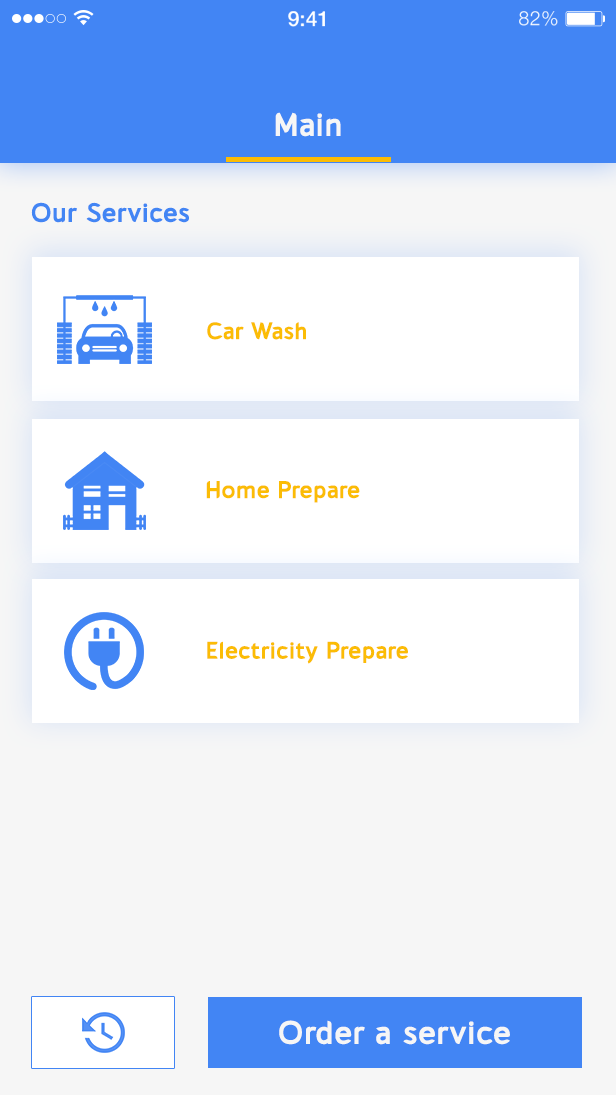
<style>
.page{position:relative;width:616px;height:1095px;background:#ffffff}
.page>*{position:absolute;margin:0}
.t1{font:21.3px "HelveticaNeue-Medium";color:#ffffff}
.t2{font:19.6px "HelveticaNeue-Light";letter-spacing:0.025em;color:#ffffff}
.t3{font:33px "cajitobold";color:#f6f6f6}
.t4{font:27px "cajitobold";color:#4285f4}
.t5{font:24px "cajitobold";color:#fbbc05}
</style>
<div class="page">
<p class="t1" style="left:288px;top:11px;width:37px;height:16px">9:41</p>
<p class="t2" style="left:519px;top:11px;width:39px;height:15px">82%</p>
<p class="t3" style="left:275px;top:112px;width:66px;height:25px">Main</p>
<p class="t4" style="left:31px;top:202px;width:158px;height:21px">Our Services</p>
<p class="t5" style="left:207px;top:322px;width:99px;height:18px">Car Wash</p>
<p class="t5" style="left:206px;top:481px;width:154px;height:22px">Home Prepare</p>
<p class="t5" style="left:207px;top:641px;width:201px;height:23px">Electricity Prepare</p>
<p class="t3" style="left:279px;top:1020px;width:231px;height:25px">Order a service</p>
</div>
